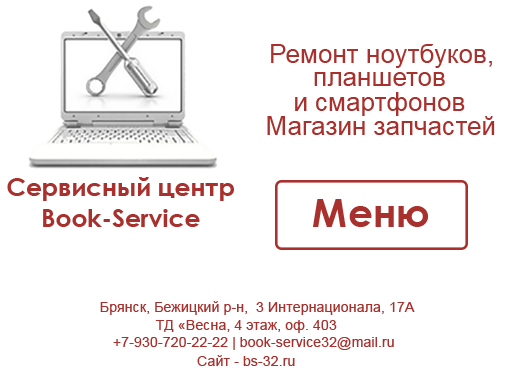
<style>
.page{position:relative;width:515px;height:377px;background:#ffffff}
.page>*{position:absolute;margin:0}
.t1{font:26.1px "ArialMT";color:#a8312d}
.t2{font:24.8px/31.3px "CenturyGothic-Bold";color:#a8312d}
.t3{font:39.1px "CenturyGothic-Bold";color:#a8312d}
.t4{font:14.3px "ArialMT";color:#a8312d}
</style>
<div class="page">
<p class="t1" style="left:271px;top:44px;width:221px;height:24px">Ремонт ноутбуков,</p>
<p class="t1" style="left:314px;top:72px;width:131px;height:14px">планшетов</p>
<p class="t1" style="left:295px;top:92px;width:170px;height:24px">и смартфонов</p>
<p class="t1" style="left:267px;top:116px;width:228px;height:19px">Магазин запчастей</p>
<p class="t2" style="left:7px;top:177px;width:227px;height:50px;text-align:center">Сервисный центр<br>Book-Service</p>
<p class="t3" style="left:313px;top:199px;width:115px;height:28px">Меню</p>
<p class="t4" style="left:100px;top:301px;width:315px;height:14px">Брянск, Бежицкий р-н,  3 Интернационала, 17А</p>
<p class="t4" style="left:155px;top:320px;width:182px;height:13px">ТД «Весна, 4 этаж, оф. 403</p>
<p class="t4" style="left:113px;top:337px;width:281px;height:13px">+7-930-720-22-22 | book-service32@mail.ru</p>
<p class="t4" style="left:197px;top:355px;width:98px;height:11px">Сайт - bs-32.ru</p>
</div>
